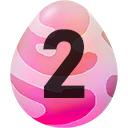
<style>
.page{position:relative;width:128px;height:128px;background:#ffffff}
.page>*{position:absolute;margin:0}
.t1{font:96px "Bahnschrift-Bold";color:#32191e}
</style>
<div class="page">
<p class="t1" style="left:43px;top:29px;width:42px;height:69px">2</p>
</div>
